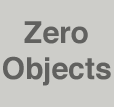
<style>
.page{position:relative;width:114px;height:107px;background:#cdcdc9}
.page>*{position:absolute;margin:0}
.t1{font:30px "Helvetica-Bold";color:#61615f}
.t2{font:30px/7px "Helvetica-Bold";color:#61615f}
</style>
<div class="page">
<p class="t1" style="left:3px;top:21px;width:108px;height:65px;text-align:center"><span class="t2">Zero<br></span>Objects</p>
</div>
